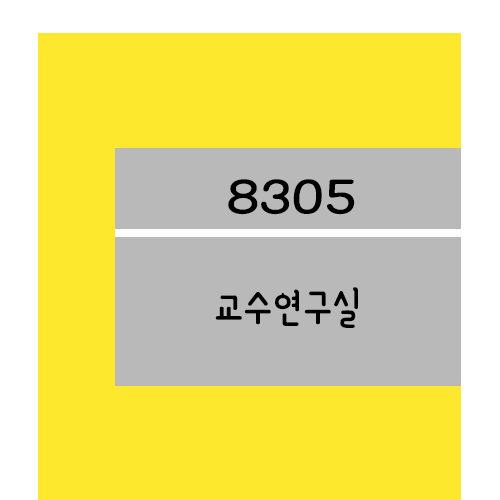
<style>
.page{position:relative;width:500px;height:500px;background:#fee82d}
.page>*{position:absolute;margin:0}
.t1{font:61.2px "YanoljaYacheR";color:#000000;scale:1.18 1}
.t2{font:48px "YanoljaYacheR";color:#000000}
</style>
<div class="page">
<p class="t1" style="left:228px;top:179px;width:127px;height:36px">8305</p>
<p class="t2" style="left:215px;top:287px;width:143px;height:41px">교수연구실</p>
</div>
